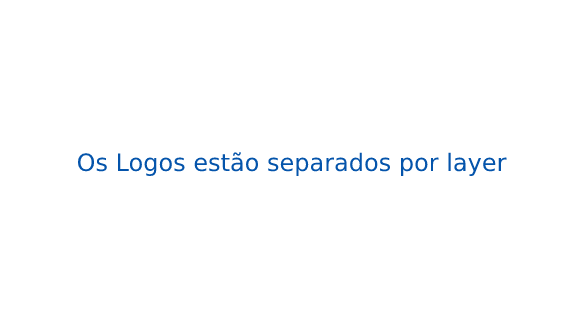
<style>
.page{position:relative;width:585px;height:329px;background:#ffffff}
.page>*{position:absolute;margin:0}
.t1{font:24px "DejaVuSans";color:#0454ab}
.t2{font:24px "DejaVuSans";color:#000000}
</style>
<div class="page">
<p class="t1" style="left:77px;top:152px;width:430px;height:24px"><span class="t2">O</span>s Logos estão separados por layer</p>
</div>
